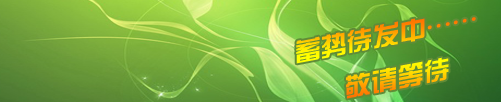
<style>
.page{position:relative;width:501px;height:102px}
.page>*{position:absolute;margin:0}
.t1{font:25.7px "FZZYJW--GB1-0";scale:1.04 1}
</style>
<div class="page">
<p class="t1" style="left:296px;top:17px;width:180px;height:82px;rotate:-11deg">蓄势待发中……<br>        敬请等待</p>
</div>
